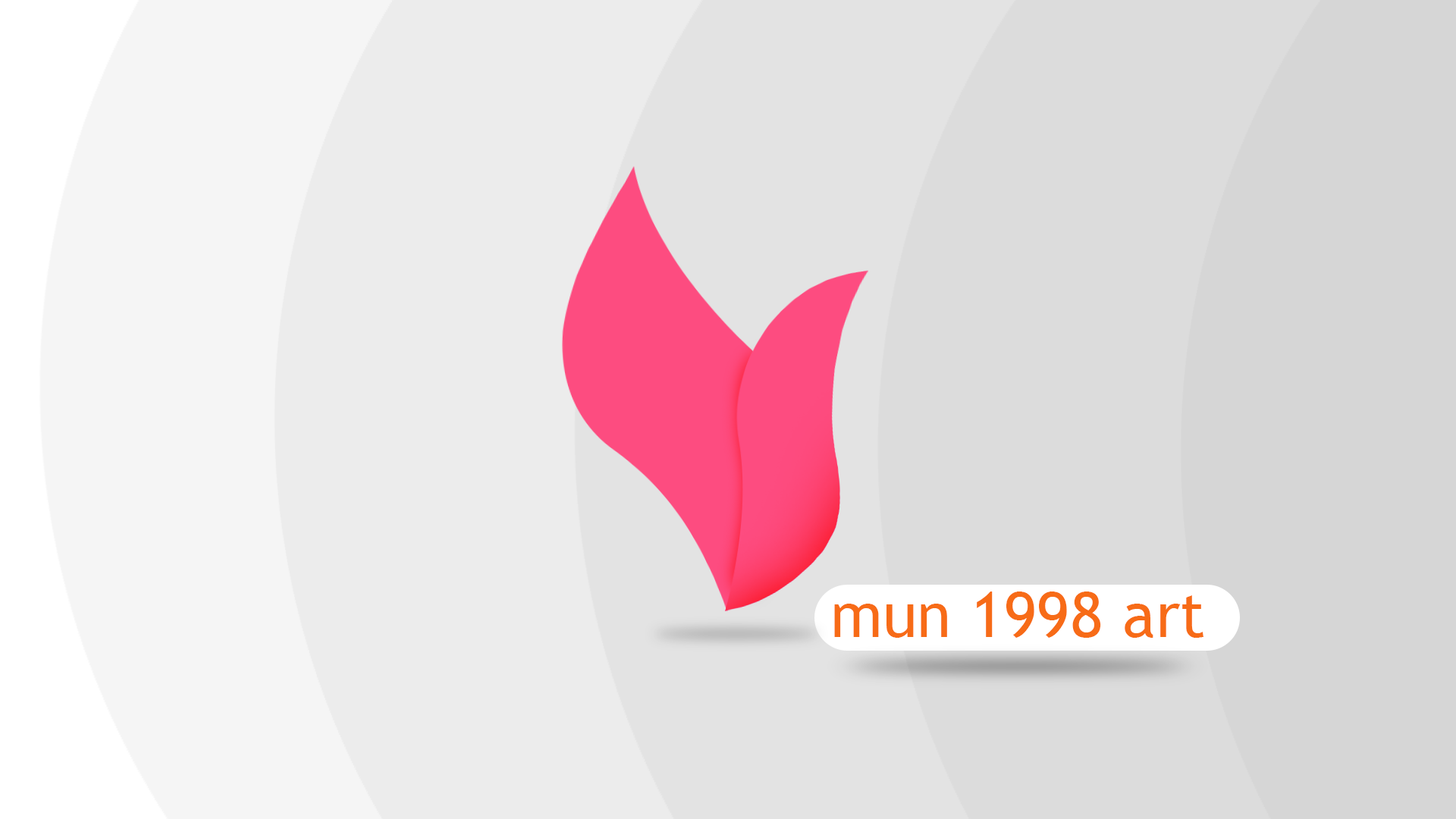
<style>
.page{position:relative;width:1456px;height:819px;background:#ececec}
.page>*{position:absolute;margin:0}
.t1{font:63.2px "TrebuchetMS";color:#f76b17}
</style>
<div class="page">
<p class="t1" style="left:834px;top:591px;width:369px;height:47px">mun 1998 art</p>
</div>
